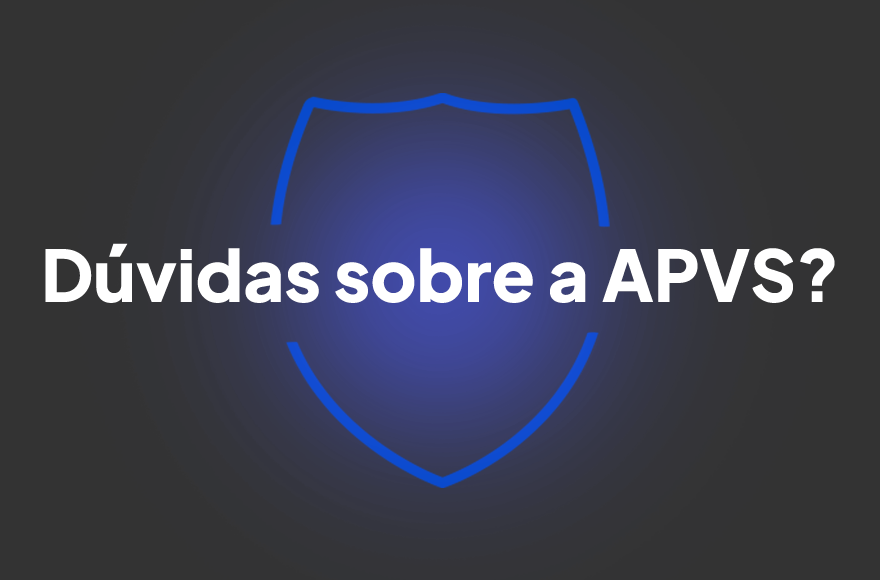
<style>
.page{position:relative;width:880px;height:580px;background:#333333}
.page>*{position:absolute;margin:0}
.t1{font:70.9px "PlusJakartaSans-ExtraBold";color:#ffffff}
</style>
<div class="page">
<p class="t1" style="left:45px;top:243px;width:790px;height:60px">Dúvidas sobre a APVS?</p>
</div>
